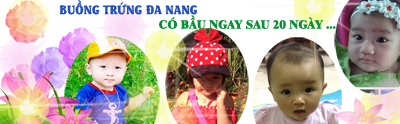
<style>
.page{position:relative;width:400px;height:124px}
.page>*{position:absolute;margin:0}
.t1{font:12px "UVNChimBienNang";color:#2450bc}
.t2{font:12px "UVNThoiNayNang";color:#099035}
</style>
<div class="page">
<p class="t1" style="left:59px;top:0px;width:138px;height:15px">BUỒNG TRỨNG ĐA NANG</p>
<p class="t2" style="left:159px;top:15px;width:177px;height:14px">CÓ BẦU NGAY SAU 20 NGÀY ...</p>
</div>
